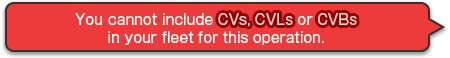
<style>
.page{position:relative;width:450px;height:58px;background:#ed3b3b}
.page>*{position:absolute;margin:0}
.t1{font:14px/18px "GothicMB101Pro-Regular";color:#ffffff}
.t2{font:14px/18px "GothicMB101Pro-Regular";color:#ffd3d3}
</style>
<div class="page">
<p class="t1" style="left:75px;top:13px;width:282px;height:32px;text-align:center">You cannot include <span class="t2">CVs, CVLs</span> or <span class="t2">CVBs<br></span>in your fleet for this operation.</p>
<p class="t1" style="left:75px;top:13px;width:282px;height:32px;text-align:center">You cannot include <span class="t2">CVs, CVLs</span> or <span class="t2">CVBs<br></span>in your fleet for this operation.</p>
</div>
